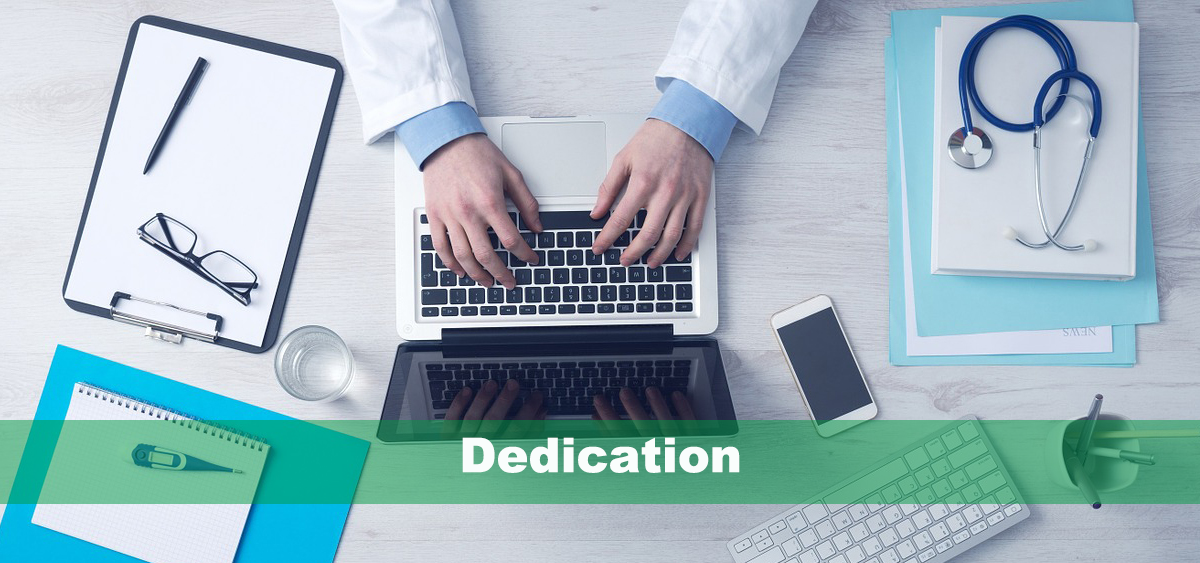
<style>
.page{position:relative;width:1200px;height:563px}
.page>*{position:absolute;margin:0}
.t1{font:48px "Arial-Black";color:#f9fdfc}
</style>
<div class="page">
<p class="t1" style="left:462px;top:437px;width:278px;height:36px">Dedication</p>
</div>
